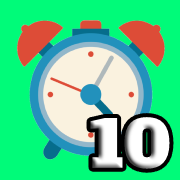
<style>
.page{position:relative;width:180px;height:180px;background:#00fb79}
.page>*{position:absolute;margin:0}
.t1{font:64px "AlfaSlabOne-Regular";color:#ffffff}
</style>
<div class="page">
<p class="t1" style="left:90px;top:117px;width:80px;height:52px">10</p>
</div>
